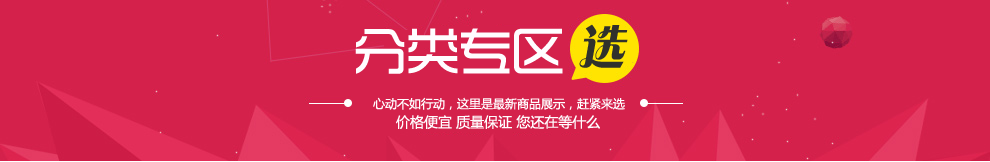
<style>
.page{position:relative;width:990px;height:162px;background:#d4214b}
.page>*{position:absolute;margin:0}
.t1{font:54px "TRENDS";letter-spacing:-0.025em;color:#fffdff}
.t2{font:50px "FZCHYJW--GB1-0";color:#30312c;font-style:italic}
.t3{font:12px "MicrosoftYaHei";color:#fffdff}
.t4{font:14px "MicrosoftYaHei";color:#fffdff}
</style>
<div class="page">
<p class="t1" style="left:355px;top:28px;width:208px;height:46px">分类专区</p>
<p class="t2" style="left:579px;top:24px;width:49px;height:44px">选</p>
<p class="t3" style="left:373px;top:97px;width:252px;height:13px">心动不如行动，这里是最新商品展示，赶紧来选</p>
<p class="t4" style="left:396px;top:115px;width:204px;height:14px">价格便宜 质量保证 您还在等什么</p>
</div>
